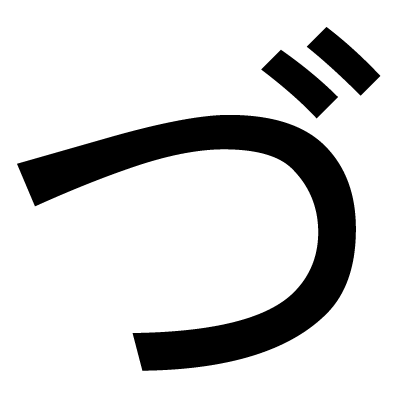
<style>
.page{position:relative;width:400px;height:400px;background:#ffffff}
.page>*{position:absolute;margin:0}
.t1{font:416.7px "MS-PGothic";color:#000000}
</style>
<div class="page">
<p class="t1" style="left:17px;top:27px;width:364px;height:344px">づ</p>
</div>
